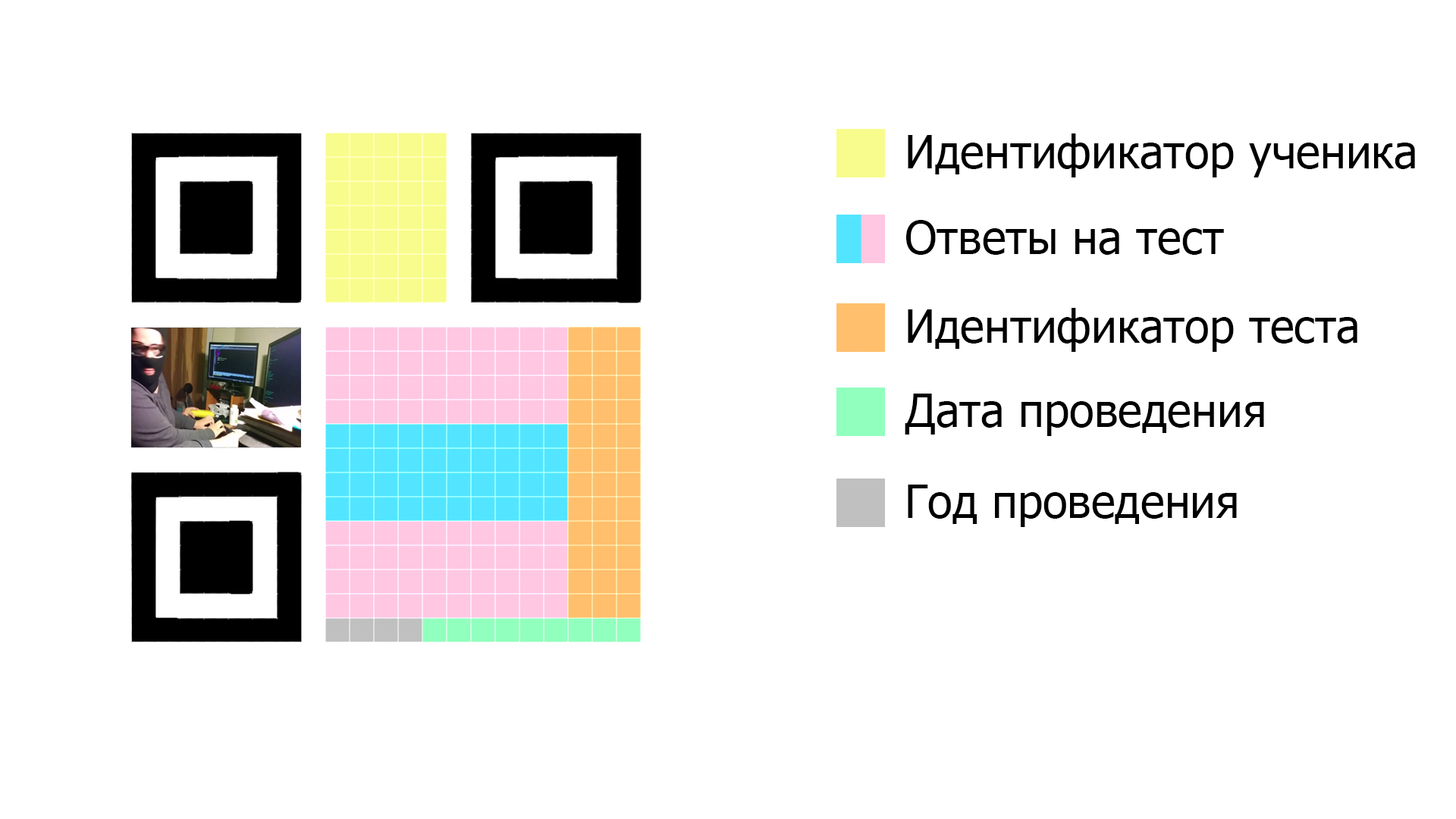
<style>
.page{position:relative;width:1456px;height:819px;background:#ffffff}
.page>*{position:absolute;margin:0}
.t1{font:45.5px "Tahoma";color:#000000}
</style>
<div class="page">
<p class="t1" style="left:908px;top:133px;width:507px;height:44px">Идентификатор ученика</p>
<p class="t1" style="left:906px;top:220px;width:318px;height:35px">Ответы на тест</p>
<p class="t1" style="left:908px;top:308px;width:449px;height:44px">Идентификатор теста</p>
<p class="t1" style="left:905px;top:394px;width:359px;height:42px">Дата проведения</p>
<p class="t1" style="left:908px;top:485px;width:329px;height:42px">Год проведения</p>
</div>
